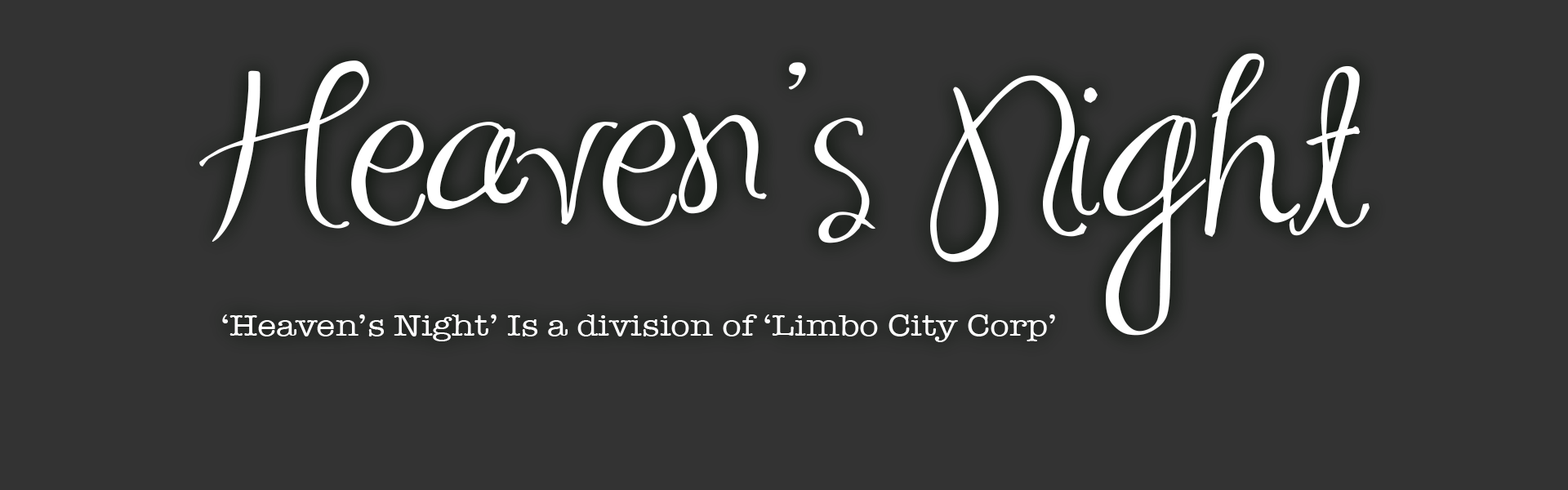
<style>
.page{position:relative;width:1568px;height:490px;background:#333333}
.page>*{position:absolute;margin:0}
.t1{font:159.9px "MASexy";color:#ffffff;scale:1.17 1}
.t2{font:30.6px "AmericanTypewriter";color:#ffffff;scale:1.17 1}
</style>
<div class="page">
<p class="t1" style="left:199px;top:53px;width:1171px;height:283px;text-align:center">Heaven’s Night</p>
<p class="t2" style="left:222px;top:314px;width:833px;height:28px">‘Heaven’s Night’ Is a division of ‘Limbo City Corp’</p>
</div>
